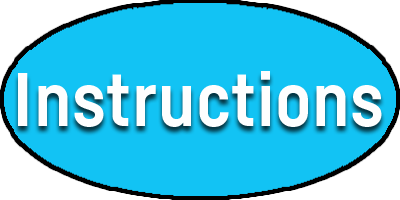
<style>
.page{position:relative;width:400px;height:200px;background:#12c3f4}
.page>*{position:absolute;margin:0}
.t1{font:75px "Fabrikat-Bold";letter-spacing:0.01em;color:#fefefe}
</style>
<div class="page">
<p class="t1" style="left:18px;top:71px;width:364px;height:56px">Instructions</p>
</div>
